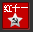
<style>
.page{position:relative;width:33px;height:32px;background:#c50000}
.page>*{position:absolute;margin:0}
.t1{font:10.4px "SimSun";letter-spacing:-0.25em;color:#ffffff}
</style>
<div class="page">
<p class="t1" style="left:4px;top:4px;width:24px;height:8px">红十一</p>
</div>
